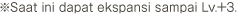
<style>
.page{position:relative;width:243px;height:15px;background:#ffffff}
.page>*{position:absolute;margin:0}
.t1{font:12px "GothicMB101Pro-Regular";color:#4c4843}
</style>
<div class="page">
<p class="t1" style="left:0px;top:2px;width:237px;height:12px">※Saat ini dapat ekspansi sampai Lv.+3.</p>
</div>
